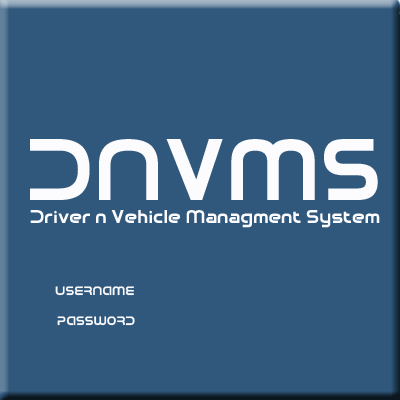
<style>
.page{position:relative;width:400px;height:400px;background:#30587c}
.page>*{position:absolute;margin:0}
.t1{font:85px "DroidLogo-Bold";color:#fcfcff}
.t2{font:18px "DroidLogo-Bold";color:#fcfcff}
.t3{font:12px "DroidLogo-Bold";color:#fcfcff}
</style>
<div class="page">
<p class="t1" style="left:30px;top:139px;width:348px;height:61px">DNVMS</p>
<p class="t2" style="left:30px;top:210px;width:350px;height:18px">Driver n Vehicle Managment System</p>
<p class="t3" style="left:55px;top:286px;width:79px;height:10px">USERNAME</p>
<p class="t3" style="left:57px;top:316px;width:78px;height:10px">PASSWORD</p>
</div>
